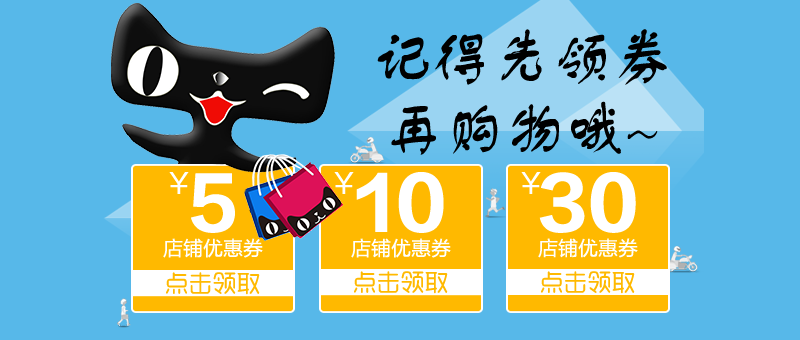
<style>
.page{position:relative;width:800px;height:340px;background:#57b8e9}
.page>*{position:absolute;margin:0}
.t1{font:60px "FZNSTJW--GB1-0";color:#000000}
.t2{font:28px "FZLTHJW--GB1-0";color:#ffffff}
.t3{font:72.1px "FZLTDHK--GBK1-0";color:#ffffff}
.t4{font:72px "FZLTDHK--GBK1-0";color:#ffffff}
.t5{font:20px "FZLTHJW--GB1-0";color:#ffffff}
.t6{font:24px "MFYueYuan_Noncommercial-Regular";color:#ffb900}
</style>
<div class="page">
<p class="t1" style="left:377px;top:29px;width:290px;height:126px;text-align:center">记得先领券<br>再购物哦~</p>
<p class="t2" style="left:169px;top:172px;width:20px;height:22px">￥</p>
<p class="t3" style="left:191px;top:173px;width:44px;height:60px">5</p>
<p class="t2" style="left:334px;top:172px;width:20px;height:22px">￥</p>
<p class="t3" style="left:356px;top:172px;width:88px;height:61px">10</p>
<p class="t2" style="left:521px;top:172px;width:20px;height:22px">￥</p>
<p class="t4" style="left:539px;top:172px;width:97px;height:61px">30</p>
<p class="t5" style="left:163px;top:238px;width:100px;height:20px">店铺优惠券</p>
<p class="t5" style="left:351px;top:238px;width:100px;height:20px">店铺优惠券</p>
<p class="t5" style="left:538px;top:238px;width:100px;height:20px">店铺优惠券</p>
<p class="t6" style="left:166px;top:272px;width:94px;height:23px">点击领取</p>
<p class="t6" style="left:354px;top:271px;width:94px;height:23px">点击领取</p>
<p class="t6" style="left:541px;top:271px;width:94px;height:23px">点击领取</p>
</div>
